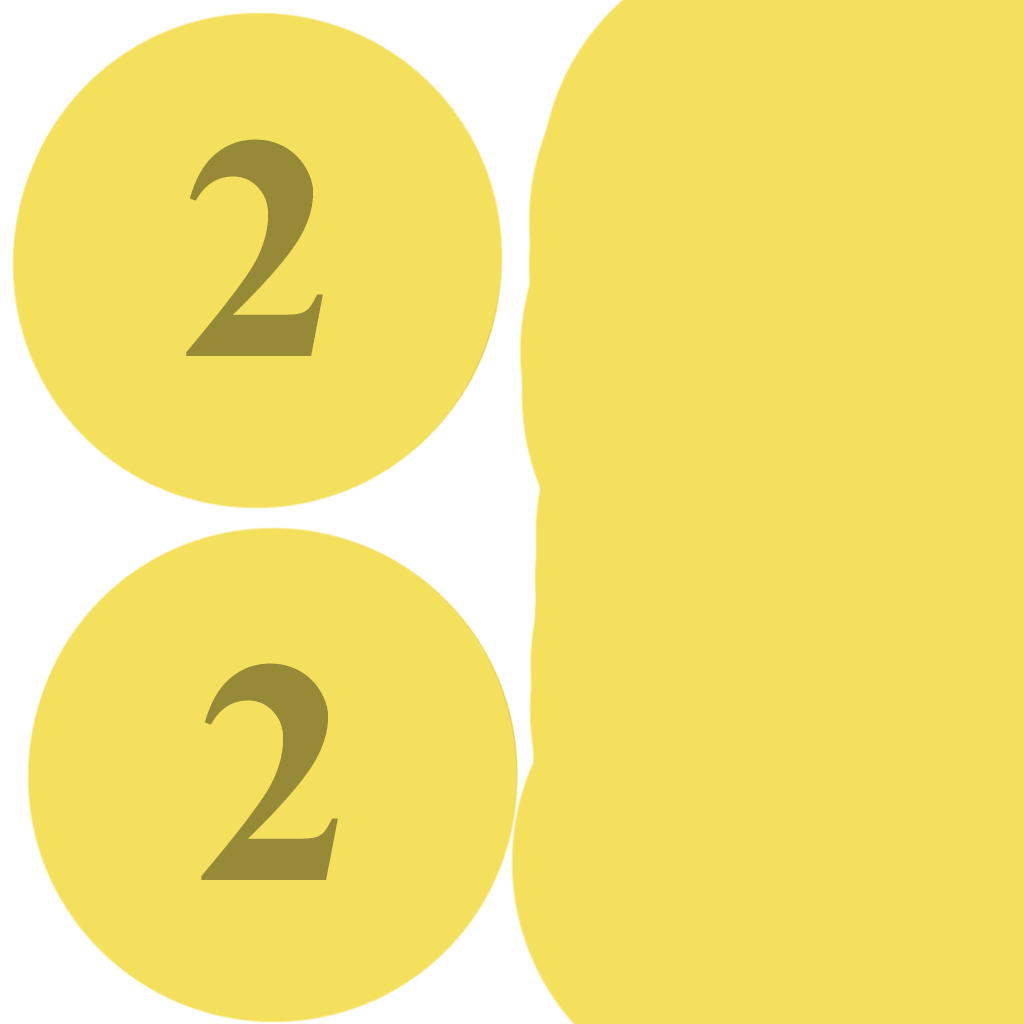
<style>
.page{position:relative;width:1024px;height:1024px;background:#f4e05d}
.page>*{position:absolute;margin:0}
.t1{font:320px "TimesNewRomanPS-BoldMT";letter-spacing:-0.02em;color:#968a39}
.t2{font:24px "TimesNewRomanPS-BoldMT";letter-spacing:-0.02em;color:#968a39}
</style>
<div class="page">
<p class="t1" style="left:186px;top:139px;width:137px;height:217px"><span class="t2"><br><br><br><br><br><br><br><br><br><br><br><br><br><br><br><br><br><br><br><br><br><br><br><br><br><br><br><br><br><br><br><br><br><br></span><br><br><br><br><br>2</p>
<p class="t1" style="left:201px;top:663px;width:137px;height:217px"><span class="t2"><br><br><br><br><br><br><br><br><br><br><br><br><br><br><br><br><br><br><br><br><br><br><br><br><br><br><br><br><br><br><br><br><br><br></span><br><br><br><br><br>2</p>
</div>
